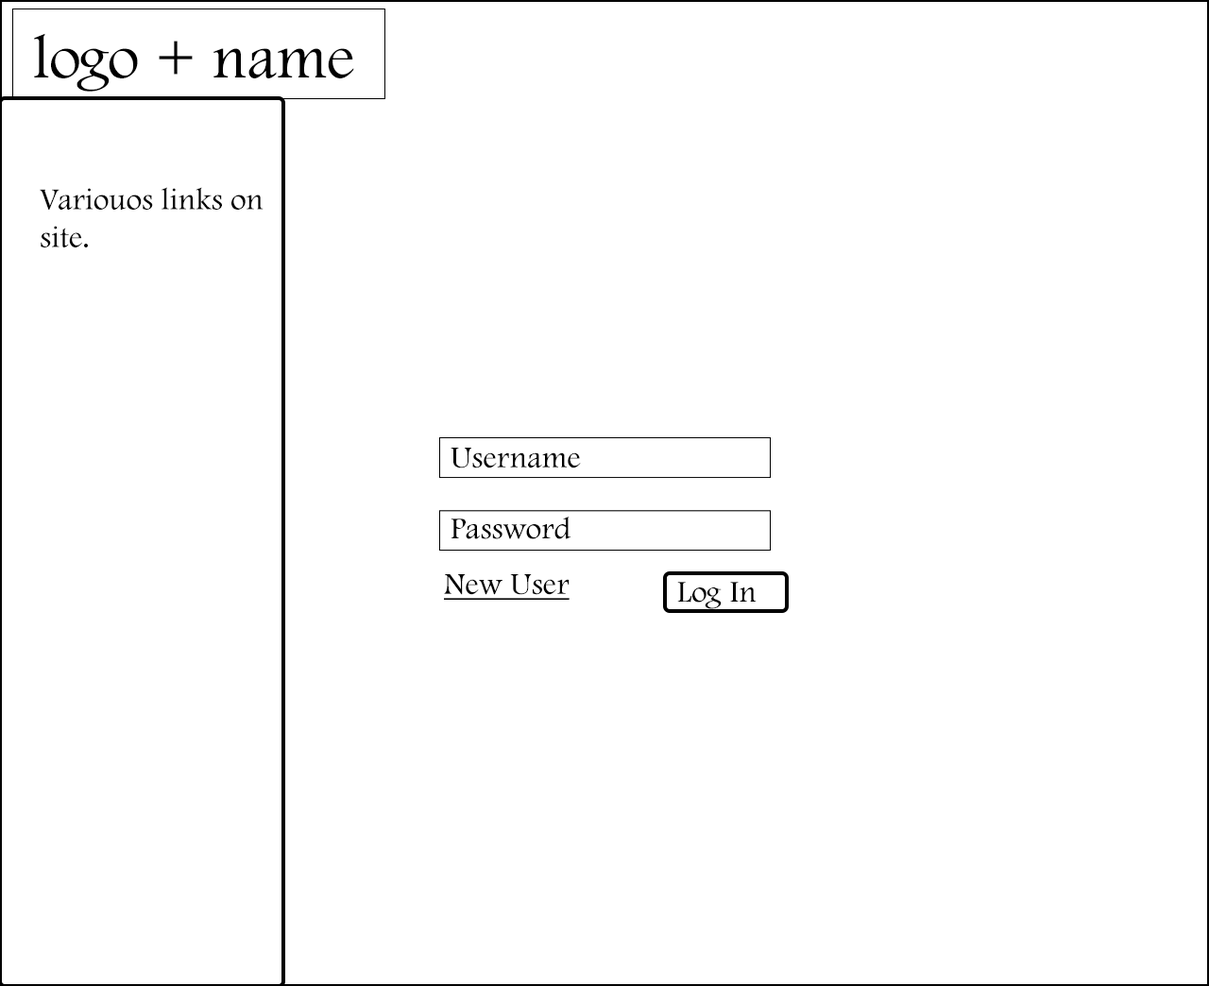
<style>
.page{position:relative;width:1209px;height:986px;background:#ffffff}
.page>*{position:absolute;margin:0}
.t1{font:63px "FootlightMTLight";color:#000000}
.t2{font:31.5px "FootlightMTLight";color:#000000}
.t3{font:31.5px "FootlightMTLight";color:#000000;text-decoration:underline}
</style>
<div class="page">
<p class="t1" style="left:34px;top:33px;width:320px;height:59px">logo + name</p>
<p class="t2" style="left:40px;top:187px;width:224px;height:60px">Variouos links on<br>site.</p>
<p class="t2" style="left:451px;top:448px;width:130px;height:21px">Username</p>
<p class="t2" style="left:451px;top:517px;width:120px;height:22px">Password</p>
<p class="t3" style="left:444px;top:574px;width:126px;height:26px">New User</p>
<p class="t2" style="left:677px;top:582px;width:80px;height:27px">Log In</p>
</div>
